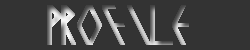
<style>
.page{position:relative;width:250px;height:50px;background:#333333}
.page>*{position:absolute;margin:0}
.t1{font:48px "exoziti";font-weight:bold}
</style>
<div class="page">
<p class="t1" style="left:47px;top:5px;width:142px;height:40px">PROFILE</p>
</div>
